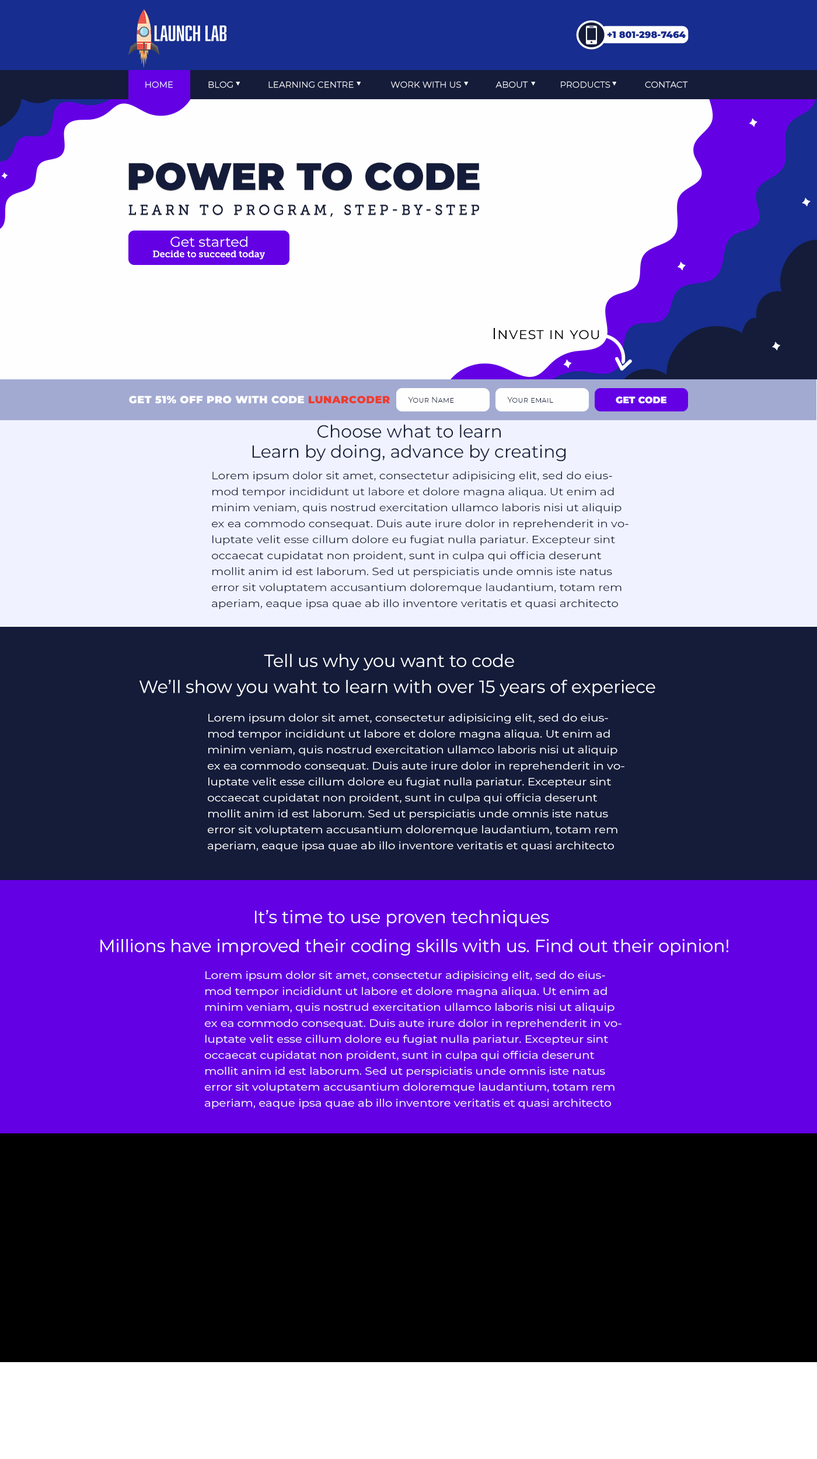
<style>
.page{position:relative;width:817px;height:1459px}
.page>*{position:absolute;margin:0}
.t1{font:9.3px "Montserrat-Black";color:#172d8f}
.t2{font:8.8px "Montserrat-Regular";color:#ffffff;text-transform:uppercase}
.t3{font:37.9px "Montserrat-Black";color:#141c3a;text-transform:uppercase}
.t4{font:14px "MuseoSlab-500";letter-spacing:0.227em;color:#141c3a;text-transform:uppercase}
.t5{font:14px "Montserrat-Regular";color:#ffffff}
.t6{font:9.3px "MuseoSlab-700";color:#fefefe}
.t7{font:15.8px "Montserrat-Regular";letter-spacing:0.026em;color:#000000;font-variant:small-caps}
.t8{font:10.5px "Montserrat-Black";letter-spacing:0.026em;color:#ffffff;text-transform:uppercase}
.t9{font:10.5px "Montserrat-Black";letter-spacing:0.026em;color:#ed3c2f;text-transform:uppercase}
.t10{font:8.2px "Montserrat-Regular";color:#141c3a;font-variant:small-caps}
.t11{font:9.3px "Montserrat-Black";color:#fefefe;font-variant:small-caps}
.t12{font:17.5px "Montserrat-Regular";color:#141c3a}
.t13{font:10.6px/16px "Montserrat-Regular";color:#141c3a;scale:1.1 1}
.t14{font:17.5px "Montserrat-Regular";color:#ffffff}
.t15{font:10.6px/16px "Montserrat-Regular";color:#ffffff;scale:1.1 1}
</style>
<div class="page">
<p class="t1" style="left:607px;top:31px;width:79px;height:8px">+1 801-298-7464</p>
<p class="t2" style="left:145px;top:81px;width:543px;height:7px">Home               Blog               Learning Centre                Work with US               About              Products               Contact</p>
<p class="t3" style="left:128px;top:162px;width:352px;height:28px">Power to code</p>
<p class="t4" style="left:128px;top:204px;width:351px;height:13px">Learn to program, step-by-step</p>
<p class="t5" style="left:170px;top:236px;width:77px;height:11px">Get started</p>
<p class="t6" style="left:153px;top:250px;width:112px;height:10px">Decide to succeed today</p>
<p class="t7" style="left:494px;top:328px;width:105px;height:12px">Invest in you</p>
<p class="t8" style="left:129px;top:396px;width:261px;height:8px">Get 51% off Pro with code <span class="t9">LUNARCODER</span></p>
<p class="t10" style="left:408px;top:397px;width:46px;height:6px">Your Name</p>
<p class="t10" style="left:507px;top:397px;width:46px;height:6px">Your email</p>
<p class="t11" style="left:616px;top:396px;width:51px;height:8px">GET CODE</p>
<p class="t12" style="left:318px;top:424px;width:183px;height:14px">Choose what to learn</p>
<p class="t12" style="left:252px;top:445px;width:314px;height:17px">Learn by doing, advance by creating</p>
<p class="t13" style="left:212px;top:471px;width:417px;height:138px">Lorem ipsum dolor sit amet, consectetur adipisicing elit, sed do eiusmod tempor incididunt ut labore et dolore magna aliqua. Ut enim ad minim veniam, quis nostrud exercitation ullamco laboris nisi ut aliquip ex ea commodo consequat. Duis aute irure dolor in reprehenderit in voluptate velit esse cillum dolore eu fugiat nulla pariatur. Excepteur sint occaecat cupidatat non proident, sunt in culpa qui officia deserunt mollit anim id est laborum. Sed ut perspiciatis unde omnis iste natus error sit voluptatem accusantium doloremque laudantium, totam rem aperiam, eaque ipsa quae ab illo inventore veritatis et quasi architecto beatae vitae dicta sunt explicabo. Nemo enim ipsam voluptatem quia voluptas sit aspernatur aut odit aut fugit, sed quia consequuntur magni dolores eos qui ratione voluptatem sequi nesciunt. Neque porro quisquam est, qui dolorem ipsum quia dolor sit amet, consectetur, adipisci velit, sed quia non numquam eius modi tempora incidunt ut labore et dolore magnam aliquam quaerat voluptatem.</p>
<p class="t14" style="left:264px;top:654px;width:250px;height:17px">Tell us why you want to code</p>
<p class="t14" style="left:140px;top:679px;width:515px;height:18px">We’ll show you waht to learn with over 15 years of experiece</p>
<p class="t15" style="left:208px;top:713px;width:417px;height:139px">Lorem ipsum dolor sit amet, consectetur adipisicing elit, sed do eiusmod tempor incididunt ut labore et dolore magna aliqua. Ut enim ad minim veniam, quis nostrud exercitation ullamco laboris nisi ut aliquip ex ea commodo consequat. Duis aute irure dolor in reprehenderit in voluptate velit esse cillum dolore eu fugiat nulla pariatur. Excepteur sint occaecat cupidatat non proident, sunt in culpa qui officia deserunt mollit anim id est laborum. Sed ut perspiciatis unde omnis iste natus error sit voluptatem accusantium doloremque laudantium, totam rem aperiam, eaque ipsa quae ab illo inventore veritatis et quasi architecto beatae vitae dicta sunt explicabo. Nemo enim ipsam voluptatem quia voluptas sit aspernatur aut odit aut fugit, sed quia consequuntur magni dolores eos qui ratione voluptatem sequi nesciunt. Neque porro quisquam est, qui dolorem ipsum quia dolor sit amet, consectetur, adipisci velit, sed quia non numquam eius modi tempora incidunt ut labore et dolore magnam aliquam quaerat voluptatem.</p>
<p class="t14" style="left:255px;top:910px;width:294px;height:17px">It’s time to use proven techniques</p>
<p class="t14" style="left:100px;top:939px;width:628px;height:17px">Millions have improved their coding skills with us. Find out their opinion!</p>
<p class="t15" style="left:205px;top:971px;width:417px;height:138px">Lorem ipsum dolor sit amet, consectetur adipisicing elit, sed do eiusmod tempor incididunt ut labore et dolore magna aliqua. Ut enim ad minim veniam, quis nostrud exercitation ullamco laboris nisi ut aliquip ex ea commodo consequat. Duis aute irure dolor in reprehenderit in voluptate velit esse cillum dolore eu fugiat nulla pariatur. Excepteur sint occaecat cupidatat non proident, sunt in culpa qui officia deserunt mollit anim id est laborum. Sed ut perspiciatis unde omnis iste natus error sit voluptatem accusantium doloremque laudantium, totam rem aperiam, eaque ipsa quae ab illo inventore veritatis et quasi architecto beatae vitae dicta sunt explicabo. Nemo enim ipsam voluptatem quia voluptas sit aspernatur aut odit aut fugit, sed quia consequuntur magni dolores eos qui ratione voluptatem sequi nesciunt. Neque porro quisquam est, qui dolorem ipsum quia dolor sit amet, consectetur, adipisci velit, sed quia non numquam eius modi tempora incidunt ut labore et dolore magnam aliquam quaerat voluptatem.</p>
</div>
